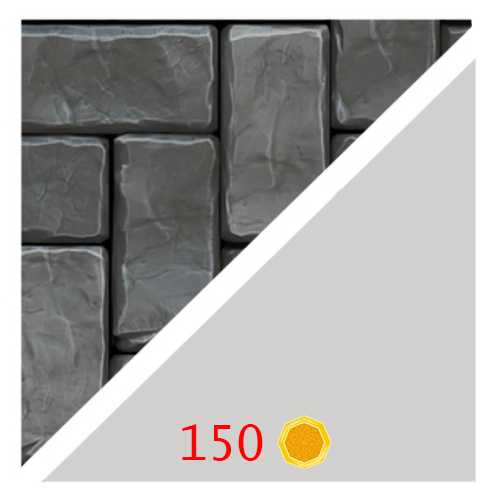
<style>
.page{position:relative;width:500px;height:500px;background:#d1d0cf}
.page>*{position:absolute;margin:0}
.t1{font:48px "LucidaConsole";color:#ff0101}
</style>
<div class="page">
<p class="t1" style="left:182px;top:424px;width:81px;height:37px">150</p>
</div>
